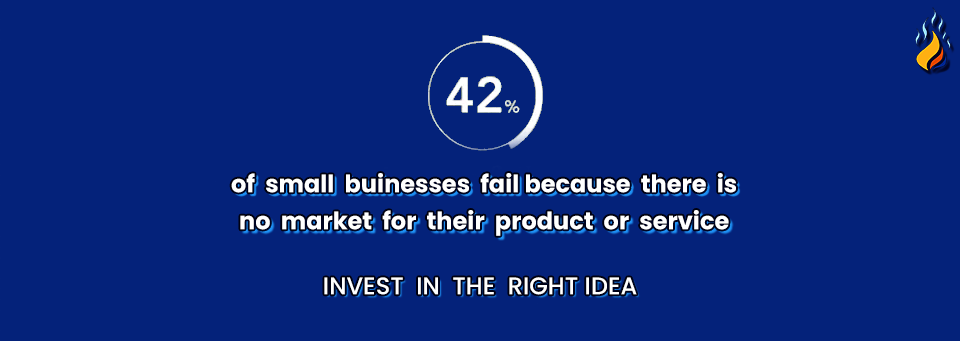
<style>
.page{position:relative;width:960px;height:341px;background:#04227a}
.page>*{position:absolute;margin:0}
.t1{font:24px "Poppins-Bold";color:#ffffff}
.t2{font:24px "Poppins-Medium";color:#ffffff}
</style>
<div class="page">
<p class="t1" style="left:231px;top:173px;width:505px;height:20px">of  small  buinesses  fail because  there  is</p>
<p class="t1" style="left:240px;top:210px;width:489px;height:26px">no  market  for  their  product  or  service</p>
<p class="t2" style="left:324px;top:277px;width:313px;height:18px">INVEST  IN  THE  RIGHT IDEA</p>
</div>
